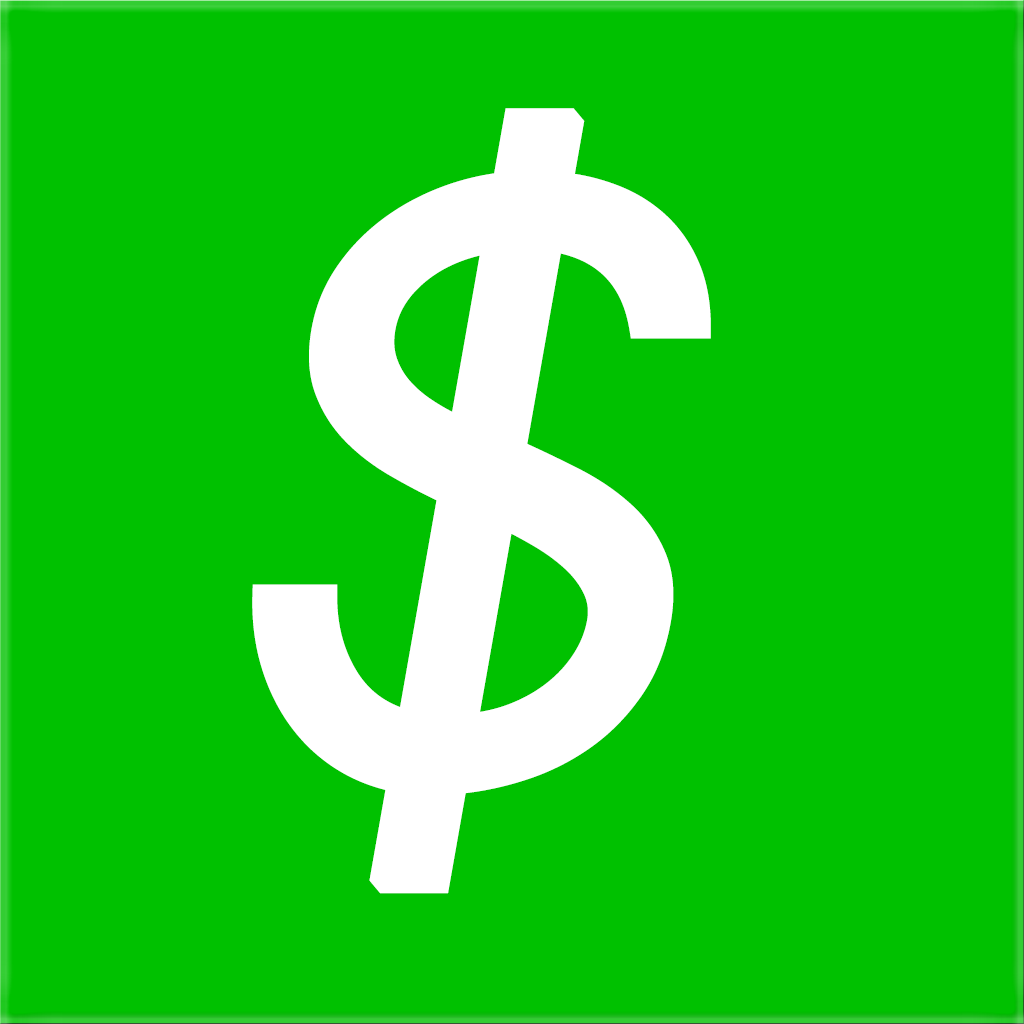
<style>
.page{position:relative;width:1024px;height:1024px;background:#00c100}
.page>*{position:absolute;margin:0}
.t1{font:800px "SinhalaSangamMN";letter-spacing:0.2em;color:#ffffff;font-variant:small-caps;font-weight:bold;font-style:italic}
</style>
<div class="page">
<p class="t1" style="left:252px;top:108px;width:459px;height:786px">$</p>
</div>
